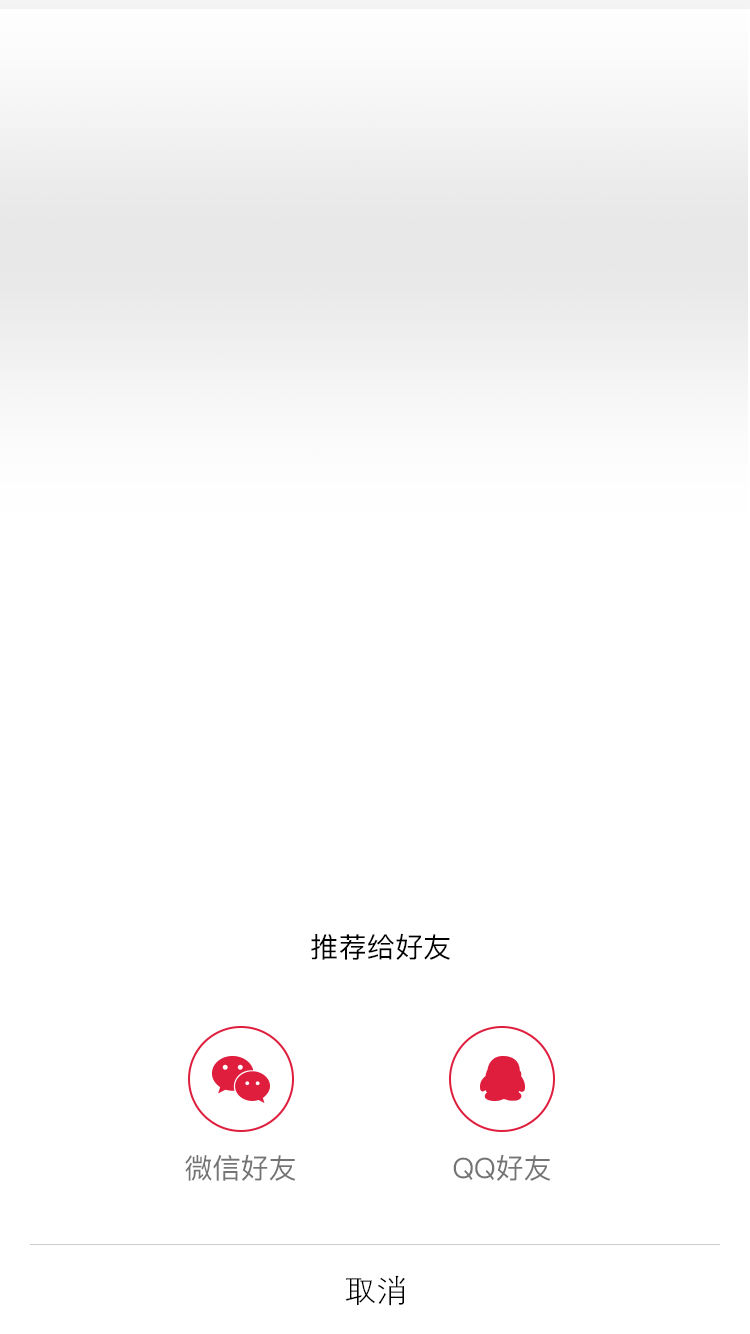
<style>
.page{position:relative;width:750px;height:1334px;background:#ffffff}
.page>*{position:absolute;margin:0}
.t1{font:28px "PingFang-SC-Medium";color:#000000}
.t2{font:28px "PingFang-SC-Medium";color:#747474}
.t3{font:32px "FZXH1JW--GB1-0";color:#000000}
</style>
<div class="page">
<p class="t1" style="left:311px;top:933px;width:139px;height:27px">推荐给好友</p>
<p class="t2" style="left:185px;top:1154px;width:111px;height:27px">微信好友</p>
<p class="t2" style="left:453px;top:1154px;width:98px;height:27px">QQ好友</p>
<p class="t3" style="left:345px;top:1275px;width:60px;height:31px">取消</p>
</div>
